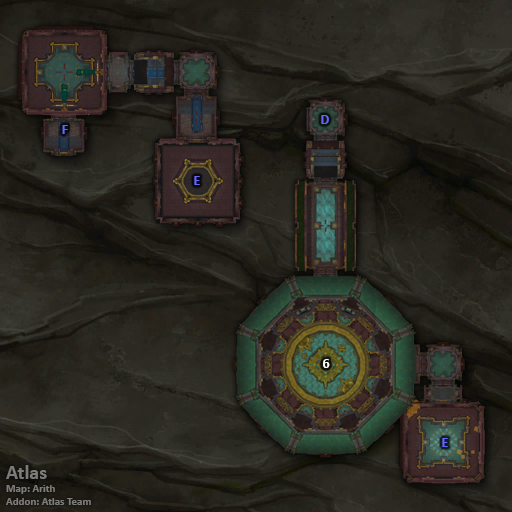
<style>
.page{position:relative;width:512px;height:512px}
.page>*{position:absolute;margin:0}
.t1{font:14px "Calibri-Bold";color:#6666ff}
.t2{font:14px "Calibri-Bold";color:#ffffff}
.t3{font:11px "Calibri-Bold";color:#7d7c7a}
.t4{font:20px "Calibri-Bold";color:#7d7c7a}
</style>
<div class="page">
<p class="t1" style="left:62px;top:125px;width:6px;height:9px">F</p>
<p class="t1" style="left:321px;top:115px;width:8px;height:9px">D</p>
<p class="t1" style="left:194px;top:176px;width:6px;height:9px">E</p>
<p class="t2" style="left:323px;top:359px;width:7px;height:9px">6</p>
<p class="t1" style="left:442px;top:438px;width:6px;height:9px">E</p>
<p class="t3" style="left:6px;top:465px;width:85px;height:40px"><span class="t4">Atlas<br></span>Map: Arith<br>Addon: Atlas Team</p>
</div>
